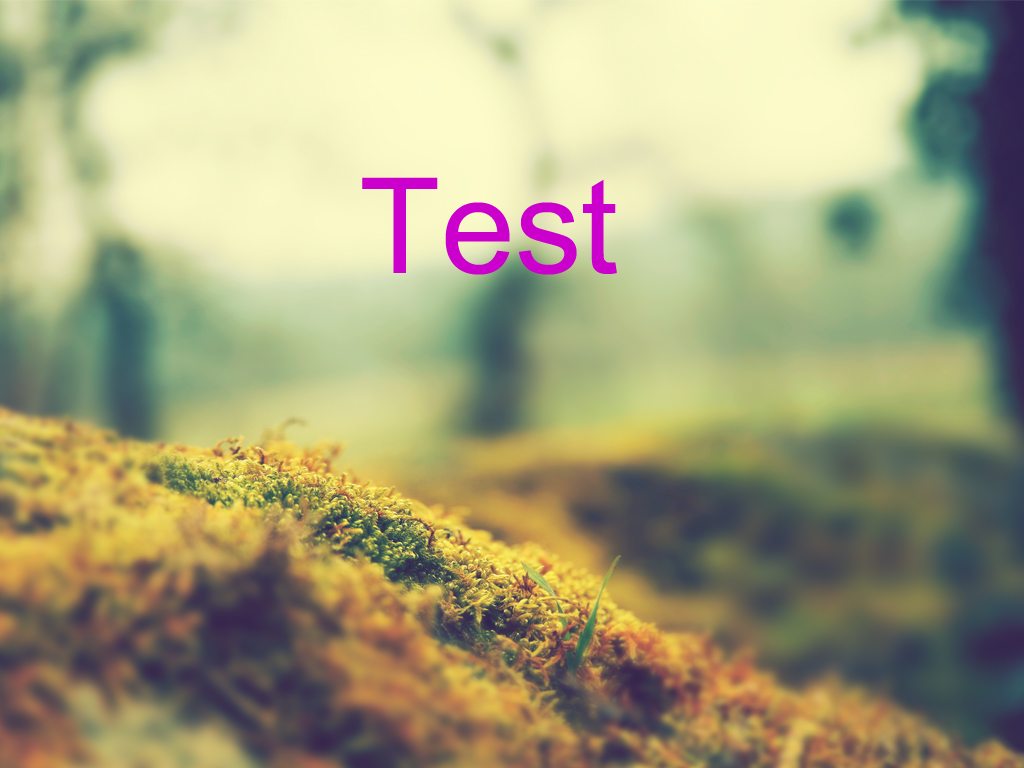
<style>
.page{position:relative;width:1024px;height:768px}
.page>*{position:absolute;margin:0}
.t1{font:133px "ArialMT";color:#cc00cc}
</style>
<div class="page">
<p class="t1" style="left:362px;top:177px;width:255px;height:98px">Test</p>
</div>
